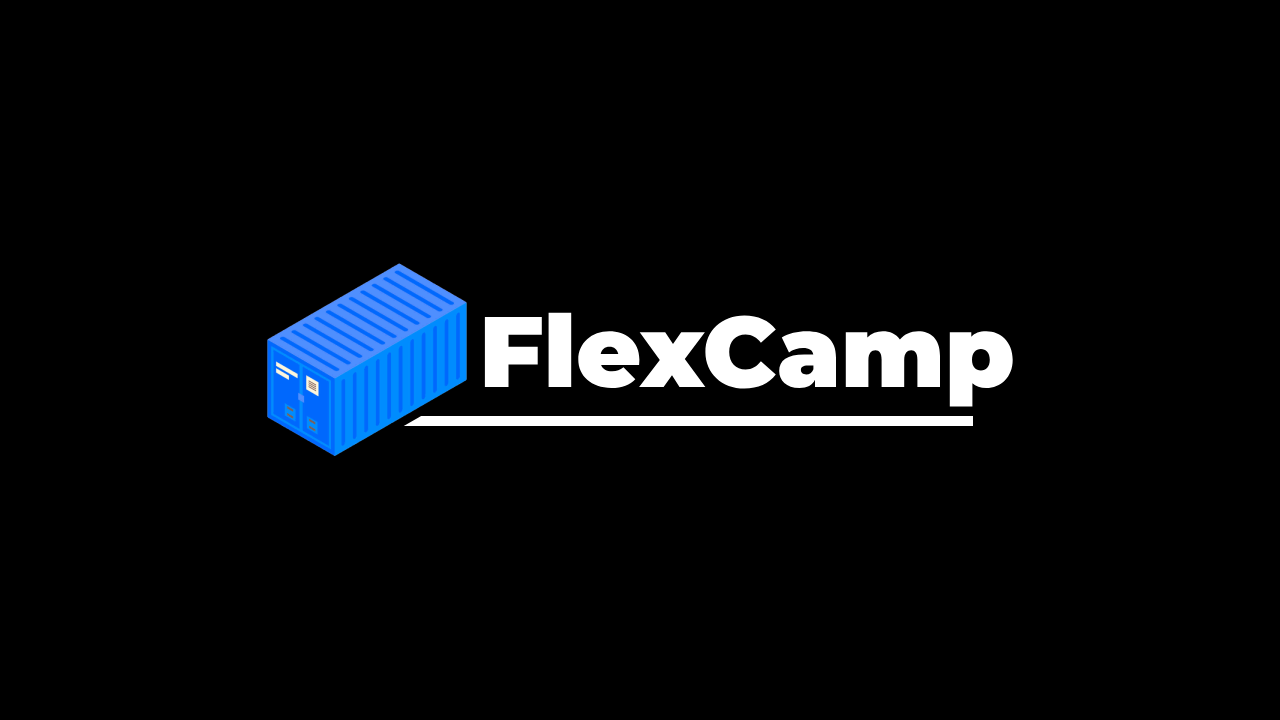
<style>
.page{position:relative;width:1280px;height:720px;background:#000000}
.page>*{position:absolute;margin:0}
.t1{font:100px "Montserrat-Black";color:#ffffff}
</style>
<div class="page">
<p class="t1" style="left:484px;top:312px;width:529px;height:95px">FlexCamp</p>
</div>
